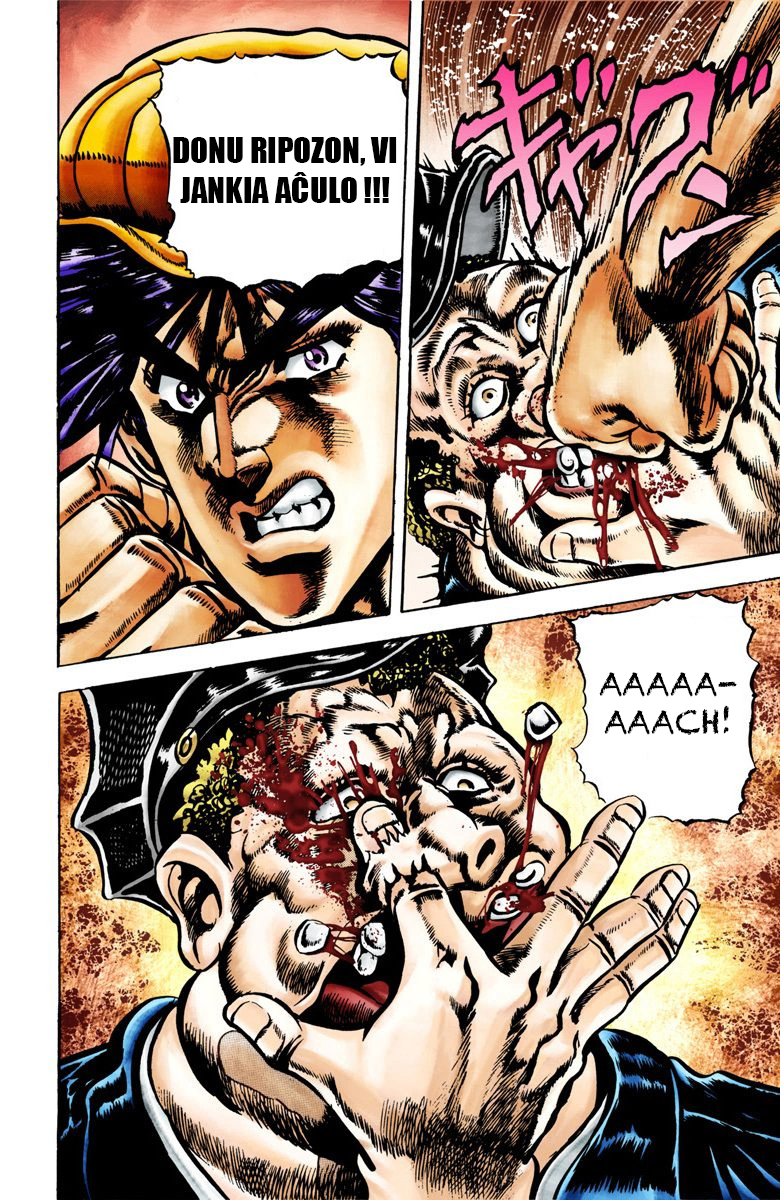
<style>
.page{position:relative;width:780px;height:1200px}
.page>*{position:absolute;margin:0}
.t1{font:32.8px "Impact";color:#000000}
.t2{font:32.1px "Chalkduster";color:#000000}
</style>
<div class="page">
<p class="t1" style="left:173px;top:137px;width:224px;height:66px;text-align:center">DONU RIPOZON, VI JANKIA AĈULO !!!</p>
<p class="t2" style="left:599px;top:672px;width:138px;height:63px;text-align:center">AAAAA-<br>AAACH!</p>
</div>
